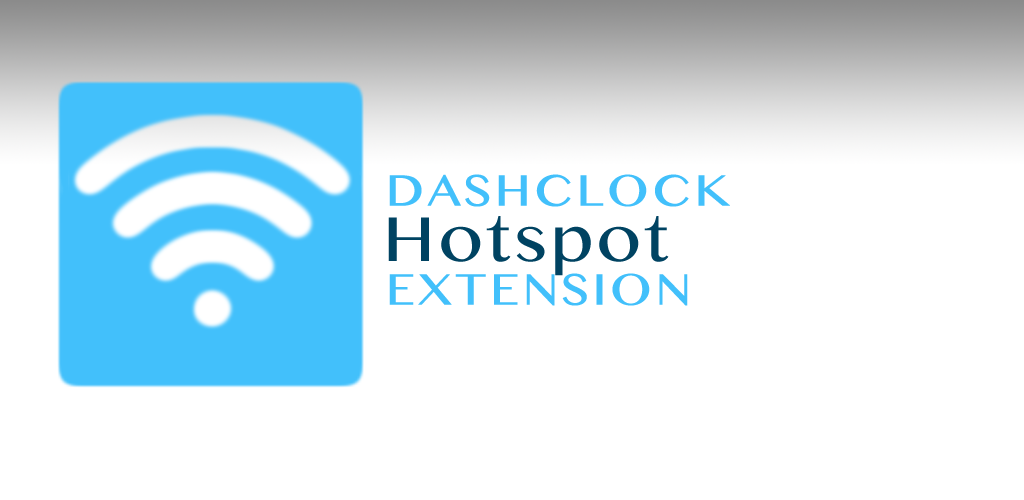
<style>
.page{position:relative;width:1024px;height:500px;background:#ffffff}
.page>*{position:absolute;margin:0}
.t1{font:44px "TamilMN";letter-spacing:0.05em;color:#42c0fb;text-transform:uppercase;font-weight:bold;scale:1.1 1}
.t2{font:64px "TamilMN";letter-spacing:0.05em;color:#004362;scale:1.1 1}
</style>
<div class="page">
<p class="t1" style="left:389px;top:174px;width:341px;height:33px">DashClock</p>
<p class="t2" style="left:388px;top:216px;width:281px;height:60px">Hotspot</p>
<p class="t1" style="left:389px;top:273px;width:299px;height:33px">Extension</p>
</div>
